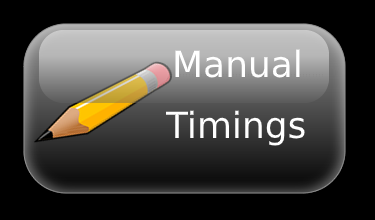
<style>
.page{position:relative;width:375px;height:220px;background:#000000}
.page>*{position:absolute;margin:0}
.t1{font:36px "DejaVuSans";color:#ffffff}
</style>
<div class="page">
<p class="t1" style="left:175px;top:49px;width:125px;height:29px">Manual</p>
<p class="t1" style="left:165px;top:110px;width:140px;height:36px">Timings</p>
</div>
